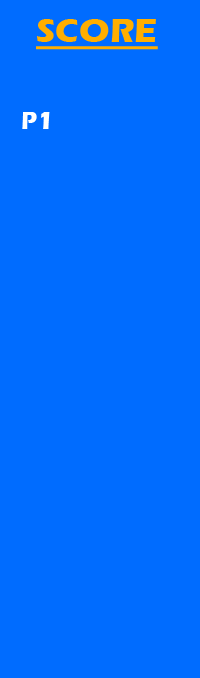
<style>
.page{position:relative;width:200px;height:678px;background:#006cff}
.page>*{position:absolute;margin:0}
.t1{font:35.3px "ErasITC-Bold";color:#ffae00;text-decoration:underline}
.t2{font:25.4px "ErasITC-Bold";color:#ffffff}
</style>
<div class="page">
<p class="t1" style="left:36px;top:19px;width:122px;height:31px">SCORE</p>
<p class="t2" style="left:22px;top:112px;width:28px;height:17px">P1</p>
</div>
